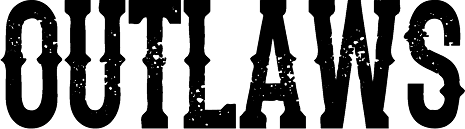
<style>
.page{position:relative;width:465px;height:129px;background:#ffffff}
.page>*{position:absolute;margin:0}
.t1{font:128px "thedeadsaloon-Regular";color:#000000}
</style>
<div class="page">
<p class="t1" style="left:0px;top:0px;width:465px;height:129px">OUTLAWS</p>
</div>
